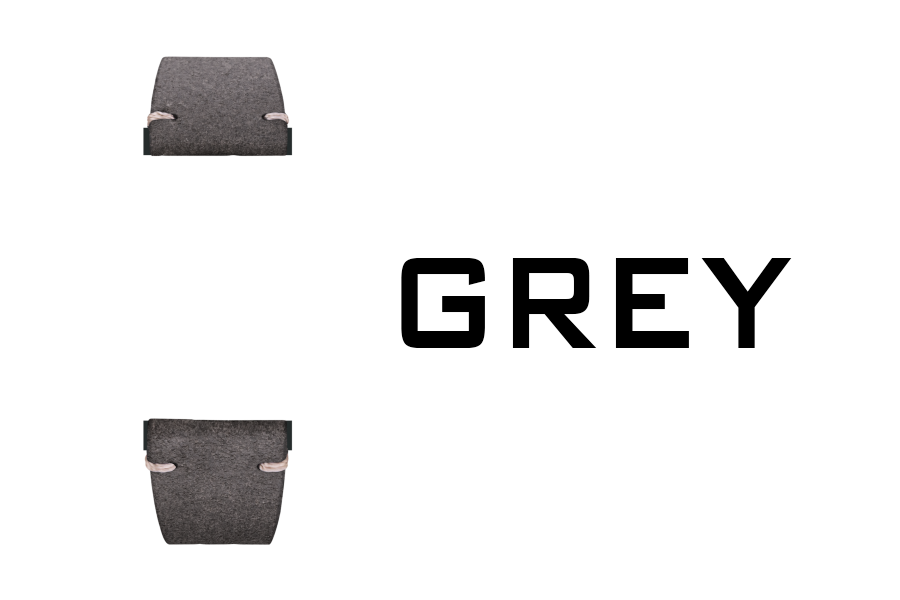
<style>
.page{position:relative;width:900px;height:600px;background:#ffffff}
.page>*{position:absolute;margin:0}
.t1{font:212.1px "BankGothicBT-Medium";color:#000000;scale:0.75 1}
</style>
<div class="page">
<p class="t1" style="left:401px;top:258px;width:391px;height:90px">grey</p>
</div>
